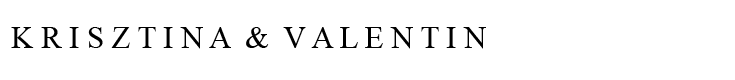
<style>
.page{position:relative;width:735px;height:80px;background:#ffffff}
.page>*{position:absolute;margin:0}
.t1{font:30.7px "TimesNewRomanPSMT";color:#000000}
</style>
<div class="page">
<p class="t1" style="left:11px;top:27px;width:475px;height:22px">K R I S Z T I N A  &amp;  V A L E N T I N</p>
</div>
